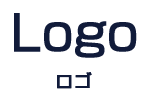
<style>
.page{position:relative;width:142px;height:100px;background:#ffffff}
.page>*{position:absolute;margin:0}
.t1{font:48px "ShinGoPro-Regular";color:#111b3a;font-weight:bold}
.t2{font:18px "ShinGoPro-Regular";color:#111b3a;font-weight:bold}
</style>
<div class="page">
<p class="t1" style="left:14px;top:13px;width:123px;height:45px">Logo</p>
<p class="t2" style="left:57px;top:72px;width:35px;height:17px">ロゴ</p>
</div>
